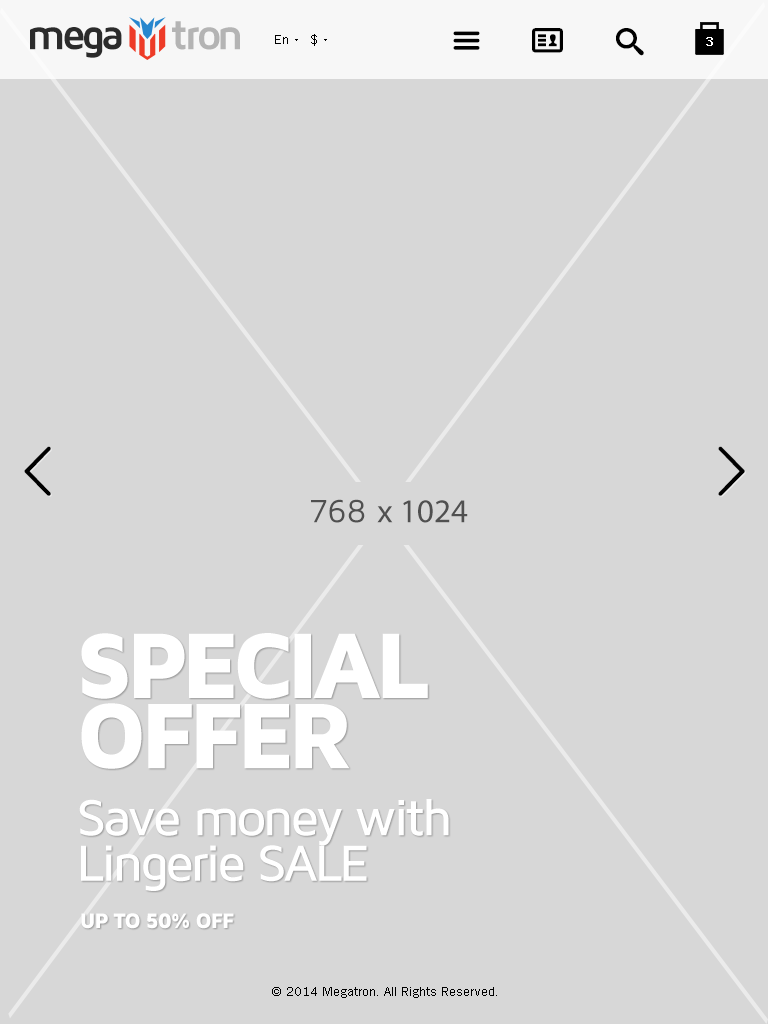
<style>
.page{position:relative;width:768px;height:1024px;background:#d7d7d7}
.page>*{position:absolute;margin:0}
.t1{font:43.8px "MavenProBold";letter-spacing:-0.1em;color:#2b2b2b}
.t2{font:43.8px "MavenProBold";letter-spacing:-0.1em;color:#b4b4b4}
.t3{font:13px "TradeGothicW01-Roman";color:#000000}
.t4{font:13px "TradeGothicW01-Bold2";color:#ffffff}
.t5{font:96.2px/70.2px "MavenProBlack";letter-spacing:-0.08em;color:#ffffff}
.t6{font:52.5px/45.3px "MavenProMedium";letter-spacing:-0.065em;color:#ffffff}
.t7{font:21.9px "MavenProBlack";letter-spacing:-0.065em;color:#ffffff}
</style>
<div class="page">
<p class="t1" style="left:30px;top:21px;width:210px;height:37px">mega     <span class="t2">tron</span></p>
<p class="t3" style="left:275px;top:35px;width:13px;height:9px">En</p>
<p class="t3" style="left:311px;top:34px;width:6px;height:12px">$</p>
<p class="t4" style="left:706px;top:37px;width:7px;height:9px">3</p>
<p class="t5" style="left:81px;top:633px;width:347px;height:136px">SPECIAL<br>OFFER</p>
<p class="t6" style="left:79px;top:799px;width:370px;height:92px">Save money with <br>Lingerie SALE</p>
<p class="t7" style="left:81px;top:913px;width:153px;height:16px">UP TO 50% OFF</p>
<p class="t3" style="left:272px;top:987px;width:225px;height:11px">© 2014 Megatron. All Rights Reserved.</p>
</div>
